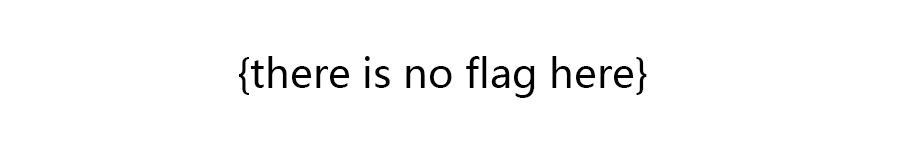
<style>
.page{position:relative;width:900px;height:150px;background:#ffffff}
.page>*{position:absolute;margin:0}
.t1{font:40px "MicrosoftYaHei";color:#000000}
</style>
<div class="page">
<p class="t1" style="left:239px;top:56px;width:408px;height:42px">{there is no flag here}</p>
</div>
